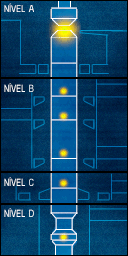
<style>
.page{position:relative;width:128px;height:256px}
.page>*{position:absolute;margin:0}
.t1{font:9.4px "ArialMT";color:#ffffff;text-transform:uppercase;scale:0.79 1}
.t2{font:9.9px "ArialMT";color:#ffffff;text-transform:uppercase;scale:0.74 1}
</style>
<div class="page">
<p class="t1" style="left:4px;top:3px;width:21px;height:9px">NÍVEL</p>
<p class="t2" style="left:4px;top:83px;width:21px;height:9px">NÍVEL</p>
<p class="t2" style="left:4px;top:177px;width:21px;height:9px">NÍVEL</p>
<p class="t2" style="left:4px;top:208px;width:21px;height:9px">NÍVEL</p>
</div>
